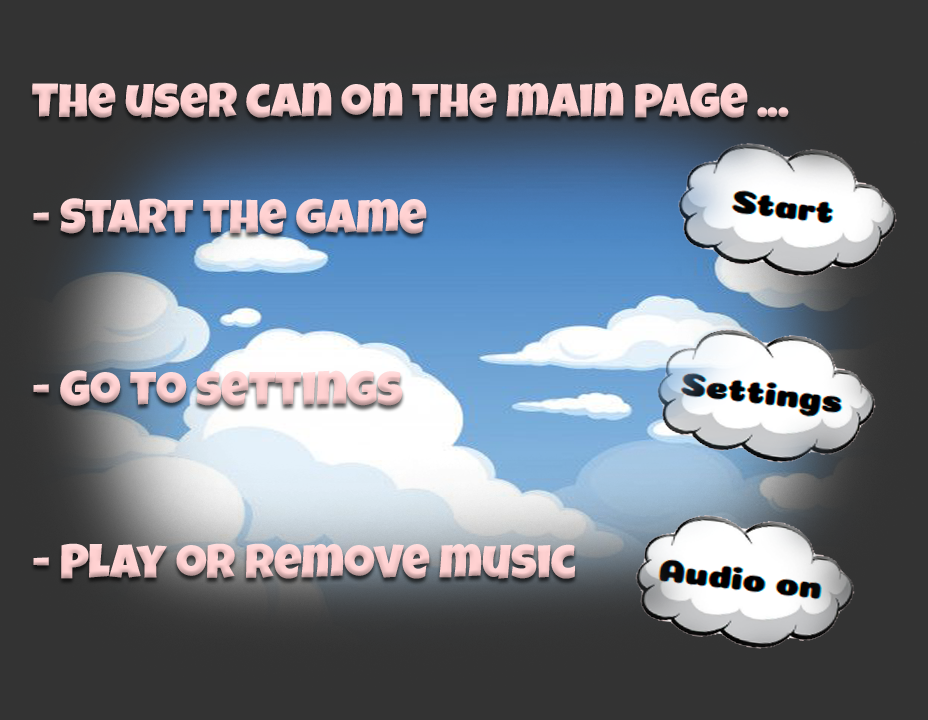
<style>
.page{position:relative;width:928px;height:720px;background:#333333}
.page>*{position:absolute;margin:0}
.t1{font:48px "LuckiestGuy-Regular";color:#ffd1d1}
</style>
<div class="page">
<p class="t1" style="left:32px;top:82px;width:757px;height:497px">The user can on the main page ...<br><br>- Start the game<br><br><br>- Go to settings<br><br><br>- Play or remove music</p>
</div>
